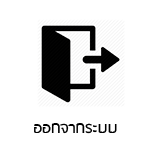
<style>
.page{position:relative;width:150px;height:150px;background:#ffffff}
.page>*{position:absolute;margin:0}
.t1{font:18px "RSU";color:#000000}
</style>
<div class="page">
<p class="t1" style="left:34px;top:123px;width:83px;height:11px">ออกจากระบบ</p>
</div>
